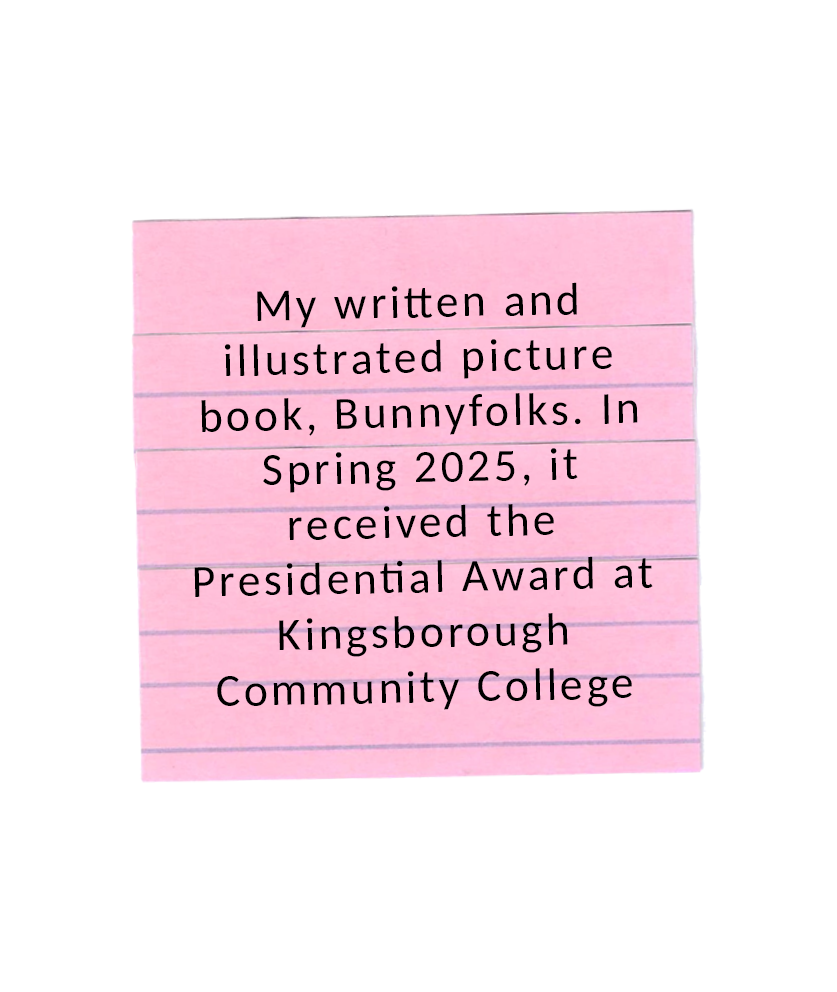
<style>
.page{position:relative;width:837px;height:992px;background:#ffffff}
.page>*{position:absolute;margin:0}
.t1{font:45.8px "Carlito-Regular";letter-spacing:0.075em;color:#000000}
</style>
<div class="page">
<p class="t1" style="left:194px;top:282px;width:459px;height:428px;rotate:-1deg">My written and illustrated picture book, Bunnyfolks. In Spring 2025, it received the Presidential Award at Kingsborough Community College</p>
</div>
